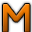
<style>
.page{position:relative;width:32px;height:32px}
.page>*{position:absolute;margin:0}
.t1{font:34px "Track"}
</style>
<div class="page">
<p class="t1" style="left:3px;top:4px;width:27px;height:28px">M</p>
</div>
